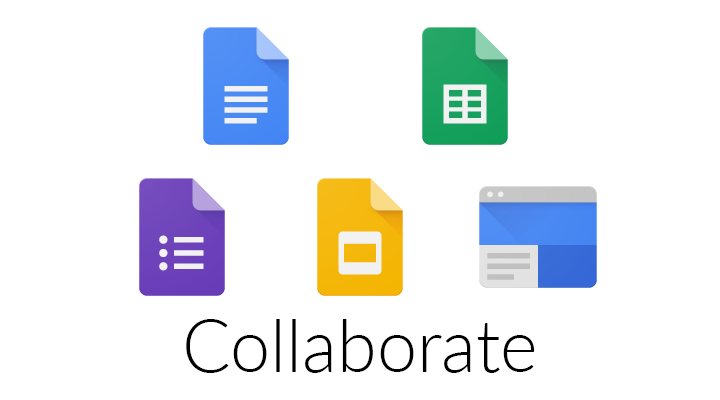
<style>
.page{position:relative;width:720px;height:400px;background:#ffffff}
.page>*{position:absolute;margin:0}
.t1{font:72px "Lato-Light";color:#000000}
</style>
<div class="page">
<p class="t1" style="left:186px;top:319px;width:349px;height:54px">Collaborate</p>
</div>
